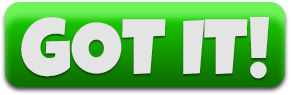
<style>
.page{position:relative;width:291px;height:95px;background:#e4e4e4}
.page>*{position:absolute;margin:0}
.t1{font:80px "LuckiestGuy-Regular";color:#e4e4e4;text-transform:uppercase}
</style>
<div class="page">
<p class="t1" style="left:21px;top:17px;width:249px;height:62px">got it!</p>
</div>
